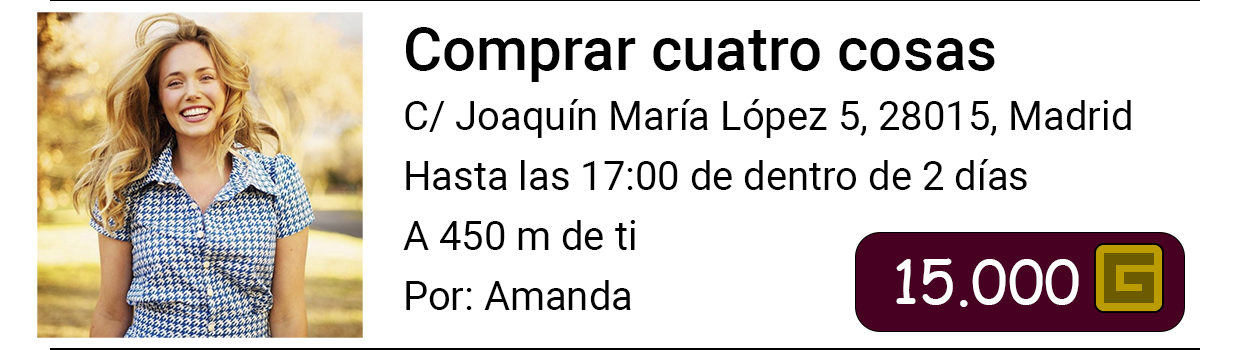
<style>
.page{position:relative;width:1250px;height:350px;background:#ffffff}
.page>*{position:absolute;margin:0}
.t1{font:40px "Roboto-Regular";color:#000000}
.t2{font:60px "Roboto-Medium";color:#000000}
.t3{font:60px "ComicSansMS";color:#ffffff}
</style>
<div class="page">
<p class="t1" style="left:403px;top:27px;width:728px;height:283px"><span class="t2">Comprar cuatro cosas<br><br></span>C/ Joaquín María López 5, 28015, Madrid<br><br>Hasta las 17:00 de dentro de 2 días<br><br>A 450 m de ti<br><br>Por: Amanda</p>
<p class="t3" style="left:896px;top:258px;width:183px;height:49px">15.000</p>
</div>
